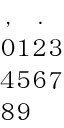
<style>
.page{position:relative;width:64px;height:128px;background:#ffffff}
.page>*{position:absolute;margin:0}
.t1{font:24px "HGSeikaishotaiPRO";color:#000000}
</style>
<div class="page">
<p class="t1" style="left:7px;top:21px;width:3px;height:6px">,</p>
<p class="t1" style="left:39px;top:21px;width:3px;height:3px">.</p>
<p class="t1" style="left:2px;top:39px;width:13px;height:17px">0</p>
<p class="t1" style="left:19px;top:39px;width:10px;height:17px">1</p>
<p class="t1" style="left:33px;top:39px;width:13px;height:17px">2</p>
<p class="t1" style="left:50px;top:39px;width:12px;height:17px">3</p>
<p class="t1" style="left:0px;top:71px;width:14px;height:17px">4</p>
<p class="t1" style="left:18px;top:71px;width:12px;height:17px">5</p>
<p class="t1" style="left:34px;top:71px;width:12px;height:17px">6</p>
<p class="t1" style="left:50px;top:72px;width:12px;height:17px">7</p>
<p class="t1" style="left:2px;top:103px;width:12px;height:17px">8</p>
<p class="t1" style="left:18px;top:103px;width:12px;height:17px">9</p>
</div>
